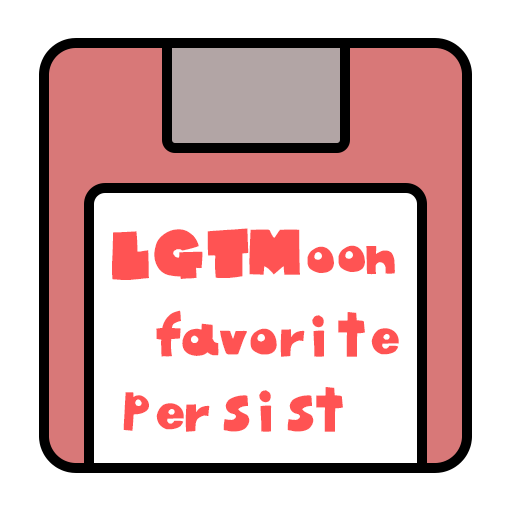
<style>
.page{position:relative;width:512px;height:512px;background:#ffffff}
.page>*{position:absolute;margin:0}
.t1{font:56px "IGAFONT";letter-spacing:-0.14em;color:#ff5353}
.t2{font:56px "IGAFONT";letter-spacing:-0.46em;color:#ff5353}
.t3{font:55.3px "IGAFONT";letter-spacing:-0.42em;color:#ff5353}
.t4{font:55.3px "IGAFONT";letter-spacing:-0.6em;color:#ff5353}
.t5{font:55.3px "IGAFONT";letter-spacing:-0.4em;color:#ff5353}
</style>
<div class="page">
<p class="t1" style="left:112px;top:228px;width:283px;height:52px;rotate:-1deg">ＬＧＴＭ<span class="t2">ｏｏｎ</span></p>
<p class="t3" style="left:156px;top:310px;width:243px;height:47px">ｆａｖｏ<span class="t4">ｒi</span><span class="t5">ｉｔｅ</span></p>
<p class="t3" style="left:123px;top:387px;width:220px;height:45px">ｐｅｒｓｉｓｔ</p>
</div>
